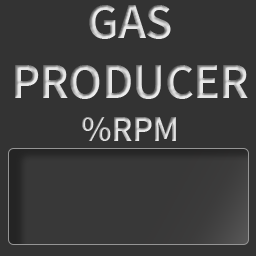
<style>
.page{position:relative;width:256px;height:256px;background:#333333}
.page>*{position:absolute;margin:0}
.t1{font:50px "SourceSansPro-SemiBold";letter-spacing:-0.01em}
.t2{font:36px "SourceSansPro-SemiBold";letter-spacing:-0.01em}
</style>
<div class="page">
<p class="t1" style="left:15px;top:5px;width:233px;height:136px;text-align:center">GAS<br>PRODUCER<br><span class="t2">%RPM</span></p>
</div>
